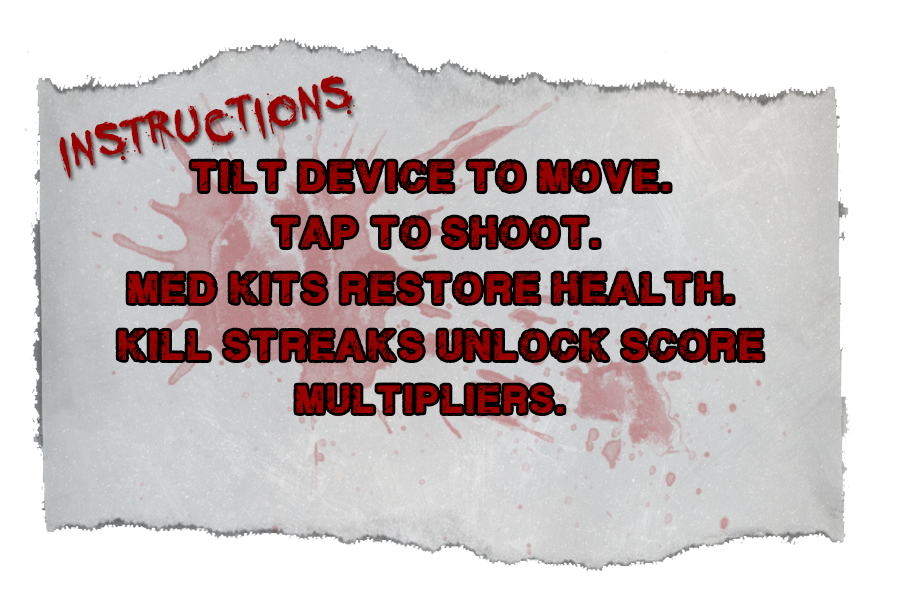
<style>
.page{position:relative;width:906px;height:589px;background:#ffffff}
.page>*{position:absolute;margin:0}
.t1{font:76.4px "YouMurdererBB";letter-spacing:0.025em;color:#990000}
.t2{font:33.3px "PlaneCrash";letter-spacing:0.05em;color:#990000}
.t3{font:31.2px "PlaneCrash";letter-spacing:0.05em;color:#990000}
</style>
<div class="page">
<p class="t1" style="left:59px;top:75px;width:296px;height:103px;rotate:-11deg">instructions</p>
<p class="t2" style="left:191px;top:161px;width:479px;height:30px">tilt device to move.</p>
<p class="t2" style="left:273px;top:217px;width:326px;height:30px">tap to shoot.</p>
<p class="t2" style="left:128px;top:273px;width:605px;height:30px">med kits restore health.</p>
<p class="t2" style="left:118px;top:330px;width:645px;height:30px">kill streaks unlock score</p>
<p class="t3" style="left:296px;top:385px;width:268px;height:28px">multipliers.</p>
</div>
